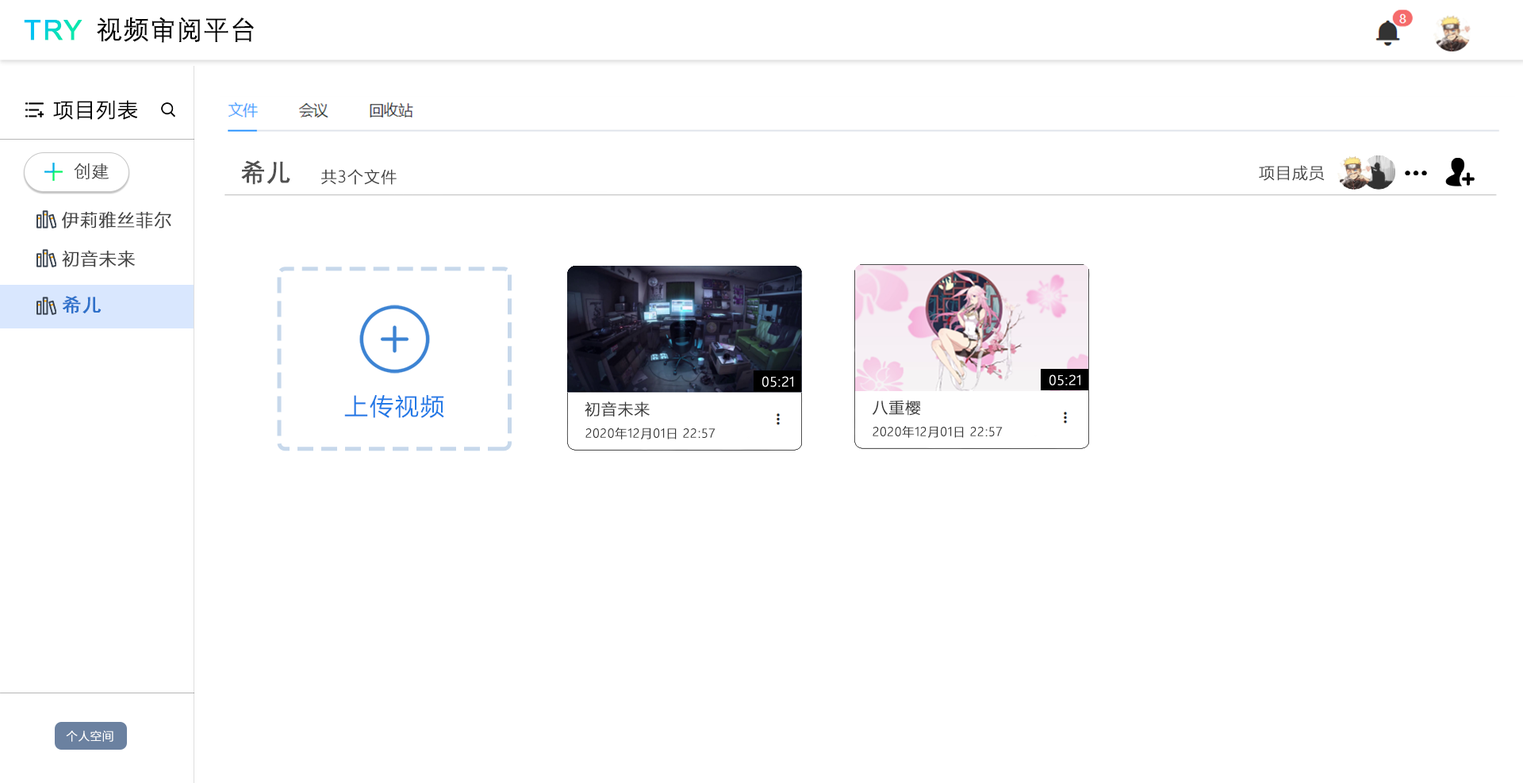
<style>
.page{position:relative;width:1523px;height:783px;background:#ffffff}
.page>*{position:absolute;margin:0}
.t1{font:26.1px "DengXian";color:#000000;text-transform:uppercase;font-weight:bold}
.t2{font:27.6px "ArialMT";letter-spacing:0.04em;text-transform:uppercase;font-weight:bold}
.t3{font:20.1px "MicrosoftYaHeiLight";letter-spacing:0.04em;color:#000000;text-transform:uppercase;font-weight:bold}
.t4{font:25.1px "SimHei";letter-spacing:0.04em;color:#505050;text-transform:uppercase;font-weight:bold;scale:0.95 1}
.t5{font:17.2px "DengXian-Light";letter-spacing:0.04em;color:#454545;text-transform:uppercase;font-weight:bold}
.t6{font:15.6px "MicrosoftYaHeiLight";letter-spacing:0.04em;color:#454545;text-transform:uppercase;font-weight:bold}
.t7{font:17.3px "MicrosoftYaHeiLight";letter-spacing:0.04em;color:#454545;text-transform:uppercase;font-weight:bold}
.t8{font:18.9px "SimHei";letter-spacing:0.04em;color:#2f71ca;text-transform:uppercase;font-weight:bold}
.t9{font:12.7px "MicrosoftYaHeiLight";letter-spacing:0.04em;color:#ffffff;text-transform:uppercase;font-weight:bold}
.t10{font:23.8px "MicrosoftYaHeiLight";letter-spacing:0.04em;color:#2179e6;text-transform:uppercase;font-weight:bold}
.t11{font:15.4px "MicrosoftYaHeiLight";letter-spacing:0.04em;color:#383838;text-transform:uppercase;font-weight:bold}
.t12{font:11.9px "MicrosoftYaHeiLight";letter-spacing:0.04em;color:#383838;text-transform:uppercase;font-weight:bold}
.t13{font:11.2px "MicrosoftYaHeiLight";letter-spacing:0.04em;color:#ffffff;text-transform:uppercase;font-weight:bold}
</style>
<div class="page">
<p class="t1" style="left:97px;top:17px;width:157px;height:26px">视频审阅平台</p>
<p class="t2" style="left:24px;top:20px;width:58px;height:20px">TRY</p>
<p class="t3" style="left:53px;top:100px;width:84px;height:20px">项目列表</p>
<p class="t4" style="left:241px;top:160px;width:49px;height:25px">希儿</p>
<p class="t5" style="left:74px;top:163px;width:35px;height:16px">创建</p>
<p class="t6" style="left:321px;top:169px;width:76px;height:16px">共3个文件</p>
<p class="t6" style="left:1259px;top:165px;width:66px;height:16px">项目成员</p>
<p class="t7" style="left:62px;top:211px;width:109px;height:17px">伊莉雅丝菲尔</p>
<p class="t7" style="left:62px;top:250px;width:73px;height:17px">初音未来</p>
<p class="t8" style="left:63px;top:296px;width:39px;height:18px">希儿</p>
<p class="t9" style="left:762px;top:376px;width:31px;height:11px">05:21</p>
<p class="t9" style="left:1049px;top:374px;width:31px;height:12px">05:21</p>
<p class="t10" style="left:344px;top:395px;width:100px;height:23px">上传视频</p>
<p class="t11" style="left:585px;top:401px;width:65px;height:16px">初音未来</p>
<p class="t11" style="left:873px;top:400px;width:48px;height:16px">八重樱</p>
<p class="t12" style="left:873px;top:426px;width:130px;height:12px">2020年12月01日 22:57</p>
<p class="t12" style="left:585px;top:428px;width:131px;height:11px">2020年12月01日 22:57</p>
<p class="t13" style="left:66px;top:731px;width:47px;height:11px">个人空间</p>
</div>
